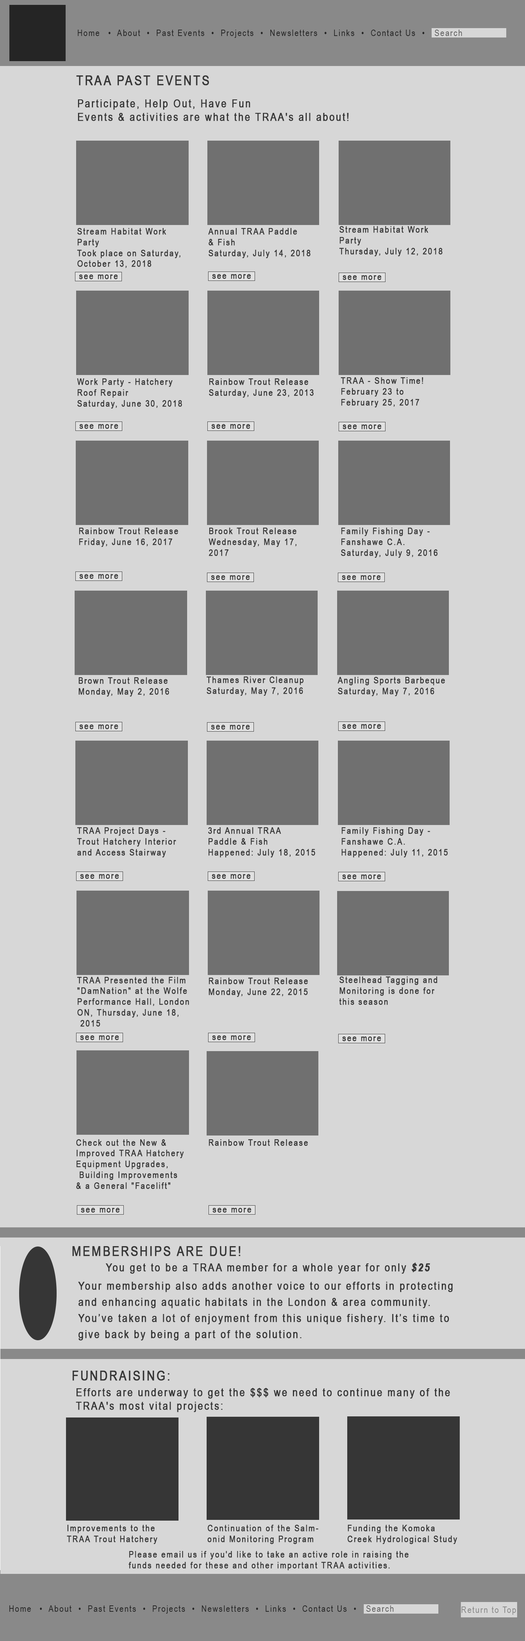
<style>
.page{position:relative;width:525px;height:1641px;background:#d7d7d7}
.page>*{position:absolute;margin:0}
.t1{font:9px "ArialNarrow";letter-spacing:0.1em;color:#252525}
.t2{font:9px "ArialNarrow";letter-spacing:0.1em;color:#5f5f5f}
.t3{font:13.5px "ArialNarrow";letter-spacing:0.1em;color:#363636;text-transform:uppercase;font-weight:bold}
.t4{font:11.2px "ArialNarrow";letter-spacing:0.1em;color:#363636;font-weight:bold}
.t5{font:9px "ArialNarrow";letter-spacing:0.1em;color:#363636;font-weight:bold}
.t6{font:13.5px "ArialNarrow";letter-spacing:0.1em;color:#363636;font-weight:bold}
.t7{font:11.2px "ArialNarrow-BoldItalic";letter-spacing:0.1em;color:#363636;font-weight:bold}
.t8{font:11.2px/16.1px "ArialNarrow";letter-spacing:0.1em;color:#363636;font-weight:bold}
.t9{font:9px "ArialNarrow";letter-spacing:0.1em;color:#898989}
.t10{font:6px "ArialNarrow";letter-spacing:0.1em;color:#898989}
</style>
<div class="page">
<p class="t1" style="left:78px;top:30px;width:384px;height:8px">Home  •  About  •  Past Events  •  Projects  •  Newsletters  •  Links  •  Contact Us  •   <span class="t2">Search</span></p>
<p class="t3" style="left:76px;top:75px;width:133px;height:11px">TRAA Past Events</p>
<p class="t4" style="left:78px;top:99px;width:271px;height:22px">Participate, Help Out, Have Fun <br>Events &amp; activities are what the TRAA's all about!</p>
<p class="t5" style="left:77px;top:228px;width:103px;height:40px">Stream Habitat Work <br>Party<br>Took place on Saturday,<br>October 13, 2018</p>
<p class="t5" style="left:208px;top:228px;width:102px;height:30px">Annual TRAA Paddle <br>&amp; Fish<br>Saturday, July 14, 2018</p>
<p class="t5" style="left:339px;top:226px;width:103px;height:30px">Stream Habitat Work <br>Party<br>Thursday, July 12, 2018</p>
<p class="t5" style="left:79px;top:274px;width:39px;height:5px">see more</p>
<p class="t5" style="left:212px;top:274px;width:39px;height:5px">see more</p>
<p class="t5" style="left:343px;top:275px;width:38px;height:5px">see more</p>
<p class="t5" style="left:341px;top:377px;width:82px;height:31px">TRAA - Show Time!<br>February 23 to <br>February 25, 2017</p>
<p class="t5" style="left:77px;top:378px;width:105px;height:31px">Work Party - Hatchery <br>Roof Repair<br>Saturday, June 30, 2018</p>
<p class="t5" style="left:209px;top:378px;width:105px;height:20px">Rainbow Trout Release<br>Saturday, June 23, 2013</p>
<p class="t5" style="left:80px;top:424px;width:38px;height:5px">see more</p>
<p class="t5" style="left:212px;top:424px;width:38px;height:5px">see more</p>
<p class="t5" style="left:343px;top:424px;width:38px;height:5px">see more</p>
<p class="t5" style="left:79px;top:528px;width:99px;height:19px">Rainbow Trout Release<br>Friday, June 16, 2017</p>
<p class="t5" style="left:208px;top:528px;width:89px;height:28px">Brook Trout Release<br>Wednesday, May 17, <br>2017</p>
<p class="t5" style="left:341px;top:528px;width:97px;height:30px">Family Fishing Day - <br>Fanshawe C.A.<br>Saturday, July 9, 2016</p>
<p class="t5" style="left:80px;top:574px;width:38px;height:5px">see more</p>
<p class="t5" style="left:211px;top:575px;width:39px;height:5px">see more</p>
<p class="t5" style="left:342px;top:575px;width:39px;height:5px">see more</p>
<p class="t5" style="left:79px;top:677px;width:90px;height:20px">Brown Trout Release<br>Monday, May 2, 2016</p>
<p class="t5" style="left:207px;top:676px;width:97px;height:20px">Thames River Cleanup<br>Saturday, May 7, 2016</p>
<p class="t5" style="left:338px;top:677px;width:107px;height:19px">Angling Sports Barbeque<br>Saturday, May 7, 2016</p>
<p class="t5" style="left:80px;top:724px;width:38px;height:5px">see more</p>
<p class="t5" style="left:211px;top:725px;width:39px;height:5px">see more</p>
<p class="t5" style="left:342px;top:724px;width:39px;height:5px">see more</p>
<p class="t5" style="left:77px;top:827px;width:99px;height:31px">TRAA Project Days - <br>Trout Hatchery Interior<br>and Access Stairway</p>
<p class="t5" style="left:208px;top:827px;width:107px;height:31px">3rd Annual TRAA <br>Paddle &amp; Fish<br>Happened: July 18, 2015</p>
<p class="t5" style="left:342px;top:827px;width:106px;height:31px">Family Fishing Day - <br>Fanshawe C.A.<br>Happened: July 11, 2015</p>
<p class="t5" style="left:80px;top:874px;width:39px;height:5px">see more</p>
<p class="t5" style="left:212px;top:874px;width:38px;height:5px">see more</p>
<p class="t5" style="left:342px;top:874px;width:39px;height:5px">see more</p>
<p class="t5" style="left:77px;top:977px;width:112px;height:50px">TRAA Presented the Film<br>"DamNation" at the Wolfe <br>Performance Hall, London<br>ON, Thursday, June 18,<br> 2015</p>
<p class="t5" style="left:209px;top:978px;width:99px;height:19px">Rainbow Trout Release<br>Monday, June 22, 2015</p>
<p class="t5" style="left:339px;top:976px;width:98px;height:29px">Steelhead Tagging and <br>Monitoring is done for <br>this season</p>
<p class="t5" style="left:80px;top:1035px;width:39px;height:5px">see more</p>
<p class="t5" style="left:212px;top:1035px;width:39px;height:5px">see more</p>
<p class="t5" style="left:342px;top:1036px;width:39px;height:5px">see more</p>
<p class="t5" style="left:76px;top:1139px;width:108px;height:50px">Check out the New &amp; <br>Improved TRAA Hatchery<br>Equipment Upgrades,<br> Building Improvements <br>&amp; a General "Facelift"</p>
<p class="t5" style="left:209px;top:1139px;width:99px;height:7px">Rainbow Trout Release</p>
<p class="t5" style="left:81px;top:1208px;width:39px;height:5px">see more</p>
<p class="t5" style="left:213px;top:1208px;width:38px;height:5px">see more</p>
<p class="t6" style="left:72px;top:1246px;width:168px;height:10px">MEMBERSHIPS ARE DUE!</p>
<p class="t4" style="left:106px;top:1263px;width:324px;height:11px">You get to be a TRAA member for a whole year for only <span class="t7">$25</span></p>
<p class="t8" style="left:78px;top:1282px;width:375px;height:59px">Your membership also adds another voice to our efforts in protecting <br>and enhancing aquatic habitats in the London &amp; area community.<br>You’ve taken a lot of enjoyment from this unique fishery. It’s time to<br>give back by being a part of the solution.</p>
<p class="t6" style="left:72px;top:1371px;width:98px;height:10px">FUNDRAISING:</p>
<p class="t4" style="left:76px;top:1388px;width:374px;height:24px">Efforts are underway to get the $$$ we need to continue many of the<br>TRAA's most vital projects:</p>
<p class="t5" style="left:67px;top:1525px;width:91px;height:19px">Improvements to the<br>TRAA Trout Hatchery</p>
<p class="t5" style="left:207px;top:1525px;width:111px;height:19px">Continuation of the Salm-<br>onid Monitoring Program</p>
<p class="t5" style="left:348px;top:1525px;width:109px;height:19px">Funding the Komoka<br>Creek Hydrological Study</p>
<p class="t5" style="left:129px;top:1551px;width:280px;height:19px">Please email us if you'd like to take an active role in raising the <br>funds needed for these and other important TRAA activities.</p>
<p class="t1" style="left:9px;top:1605px;width:385px;height:9px">Home  •  About  •  Past Events  •  Projects  •  Newsletters  •  Links  •  Contact Us  •   <span class="t2">Search</span></p>
<p class="t9" style="left:462px;top:1606px;width:54px;height:9px"><span class="t10"><br></span>Return to Top</p>
</div>
